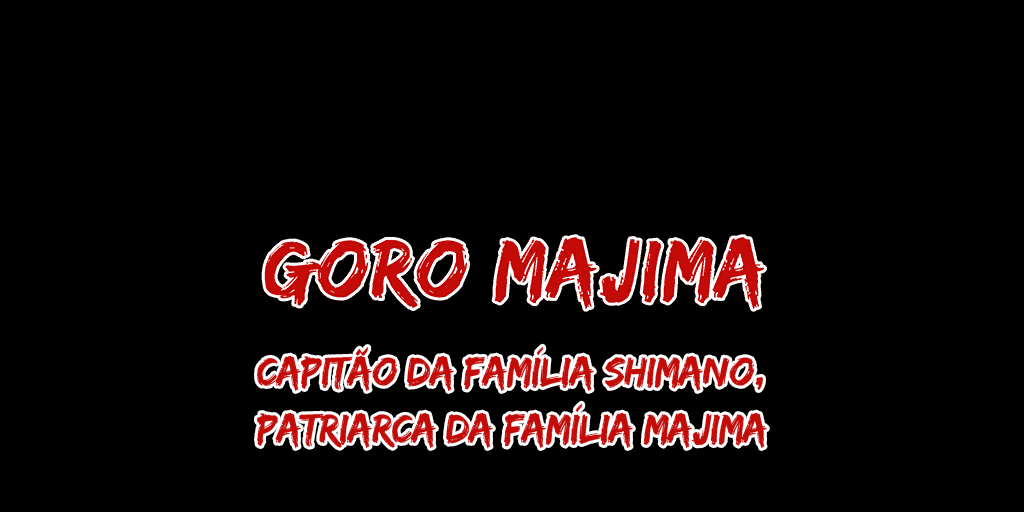
<style>
.page{position:relative;width:1024px;height:512px;background:#000000}
.page>*{position:absolute;margin:0}
.t1{font:42px/57px "EdoSZ";letter-spacing:-0.02em;color:#c30b08}
</style>
<div class="page">
<p class="t1" style="left:257px;top:346px;width:510px;height:102px;text-align:center">capitão da família Shimano,<br>patriarca da família Majima</p>
</div>
